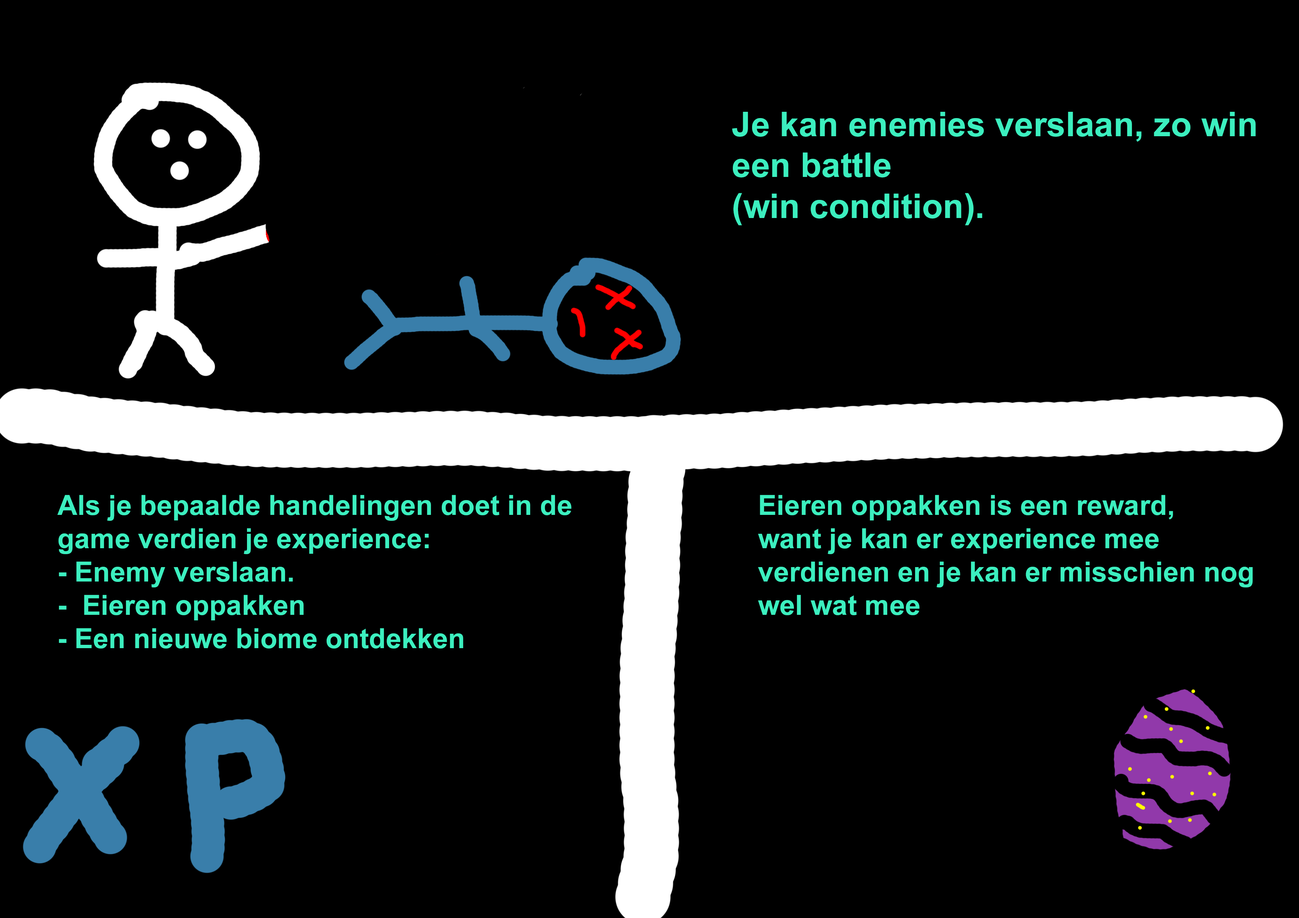
<style>
.page{position:relative;width:1299px;height:918px;background:#000000}
.page>*{position:absolute;margin:0}
.t1{font:34.1px "Arial-BoldMT";color:#3cefbf}
.t2{font:27.8px "Arial-BoldMT";color:#3cefbf}
</style>
<div class="page">
<p class="t1" style="left:732px;top:112px;width:523px;height:113px">Je kan enemies verslaan, zo win <br>een battle<br>(win condition).</p>
<p class="t2" style="left:57px;top:495px;width:514px;height:154px">Als je bepaalde handelingen doet in de <br>game verdien je experience:<br>- Enemy verslaan.<br>-  Eieren oppakken<br>- Een nieuwe biome ontdekken</p>
<p class="t2" style="left:758px;top:495px;width:494px;height:120px">Eieren oppakken is een reward,<br>want je kan er experience mee <br>verdienen en je kan er misschien nog <br>wel wat mee</p>
</div>
